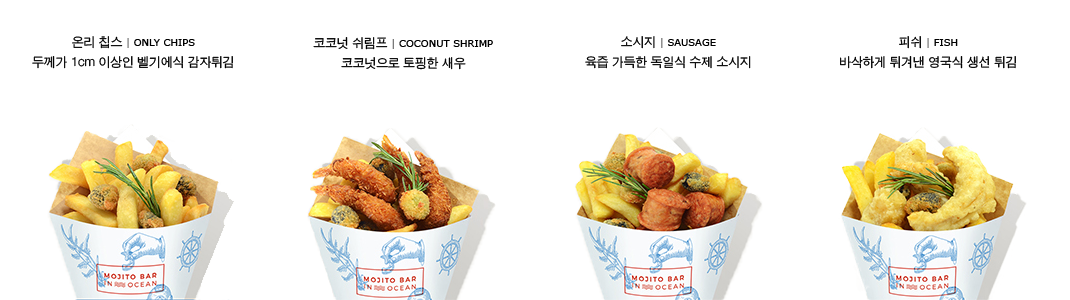
<style>
.page{position:relative;width:1070px;height:300px;background:#ffffff}
.page>*{position:absolute;margin:0}
.t1{font:13px/20px "SandJg";color:#000000}
.t2{font:10px/20px "Verdana";color:#666666}
.t3{font:10px/20px "Verdana";color:#000000}
</style>
<div class="page">
<p class="t1" style="left:32px;top:36px;width:201px;height:33px;text-align:center">온리 칩스 <span class="t2">|</span><span class="t3"> ONLY CHIPS<br></span>두께가 1cm 이상인 벨기에식 감자튀김</p>
<p class="t3" style="left:313px;top:37px;width:180px;height:33px;text-align:center"><span class="t1">코코넛 쉬림프 </span><span class="t2">|</span> COCONUT SHRIMP<br><span class="t1">코코넛으로 토핑한 새우</span></p>
<p class="t1" style="left:585px;top:36px;width:166px;height:33px;text-align:center">소시지 <span class="t2">|</span><span class="t3"> SAUSAGE<br></span>육즙 가득한 독일식 수제 소시지</p>
<p class="t1" style="left:840px;top:36px;width:176px;height:33px;text-align:center">피쉬 <span class="t2">|</span><span class="t3"> FISH<br></span>바삭하게 튀겨낸 영국식 생선 튀김</p>
</div>
